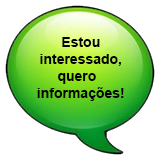
<style>
.page{position:relative;width:160px;height:160px;background:#ffffff}
.page>*{position:absolute;margin:0}
.t1{font:14px "Arial-BoldMT";color:#000000}
</style>
<div class="page">
<p class="t1" style="left:37px;top:37px;width:87px;height:64px;text-align:center">Estou<br>interessado,<br>quero  <br>informações!</p>
</div>
